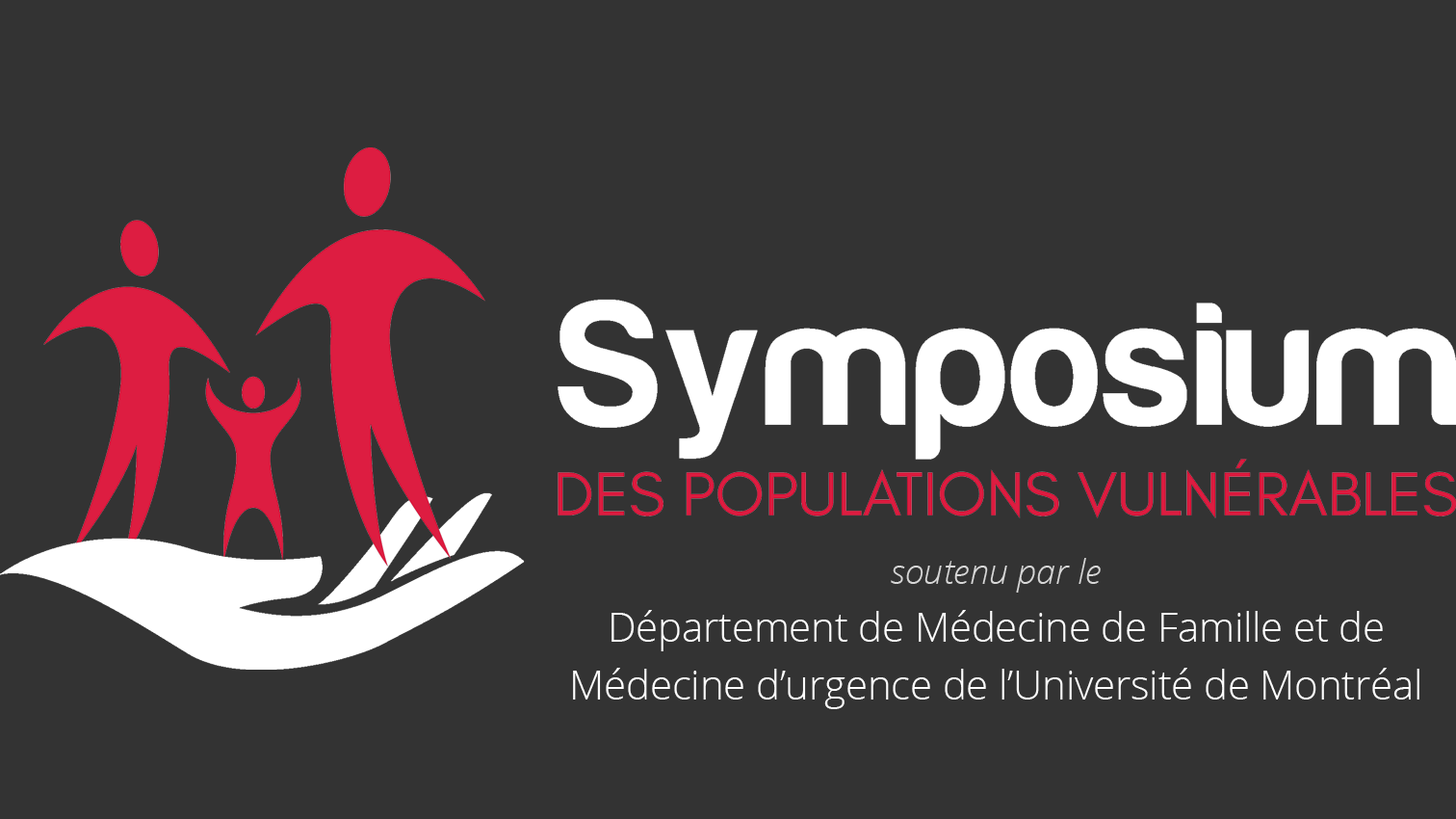
<style>
.page{position:relative;width:1456px;height:819px;background:#333333}
.page>*{position:absolute;margin:0}
.t1{font:34.7px "OpenSansLight-Italic";color:#d7d7d7}
.t2{font:40.5px/57.8px "OpenSans-Light";letter-spacing:-0.005em;color:#ffffff}
.t3{font:34.7px/72.2px "OpenSansLight-Italic";color:#ffffff}
</style>
<div class="page">
<p class="t1" style="left:891px;top:558px;width:210px;height:34px">soutenu par le</p>
<p class="t2" style="left:573px;top:610px;width:847px;height:99px;text-align:center"><span class="t3"><br></span>Département de Médecine de Famille et de <br>Médecine d’urgence de l’Université de Montréal</p>
</div>
